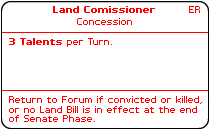
<style>
.page{position:relative;width:210px;height:130px;background:#ffffff}
.page>*{position:absolute;margin:0}
.t1{font:8px "PFTempestaSeven-Bold";color:#ff0000}
.t2{font:8px "PFTempestaSeven";color:#ff0000}
</style>
<div class="page">
<p class="t1" style="left:53px;top:6px;width:102px;height:7px">Land Comissioner</p>
<p class="t2" style="left:189px;top:6px;width:11px;height:7px">ER</p>
<p class="t2" style="left:77px;top:18px;width:55px;height:7px">Concession</p>
<p class="t1" style="left:9px;top:38px;width:103px;height:9px">3 Talents<span class="t2"> per Turn.</span></p>
<p class="t2" style="left:9px;top:96px;width:193px;height:26px">Return to Forum if convicted or killed,<br>or no Land Bill is in effect at the end<br>of Senate Phase.</p>
</div>
